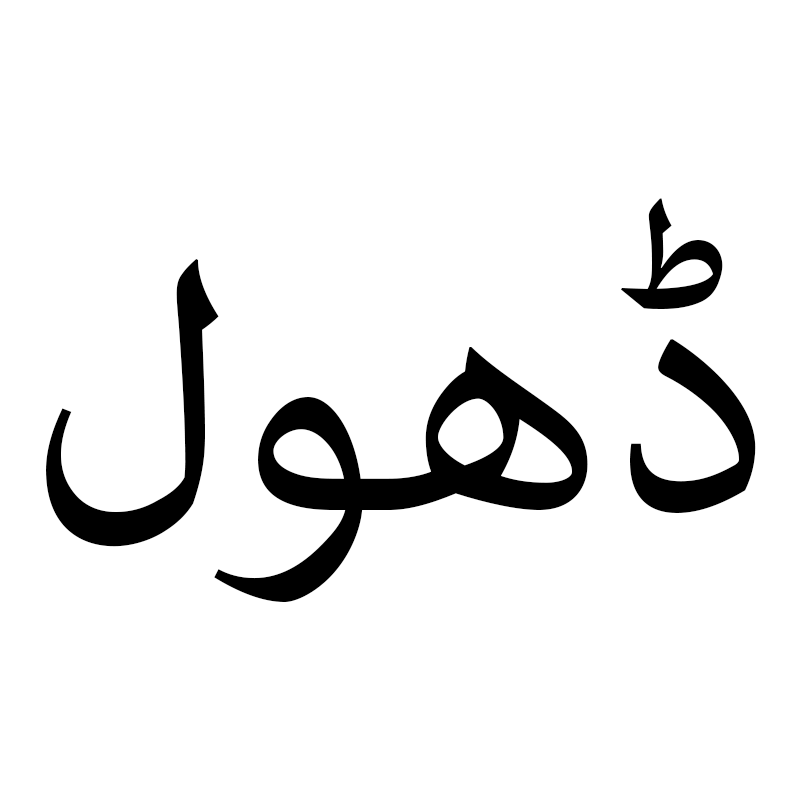
<style>
.page{position:relative;width:800px;height:800px;background:#ffffff}
.page>*{position:absolute;margin:0}
.t1{font:500px "AdobeArabic-Regular";color:#000000}
</style>
<div class="page">
<p class="t1" style="left:46px;top:198px;width:710px;height:405px">ڈھول</p>
</div>
